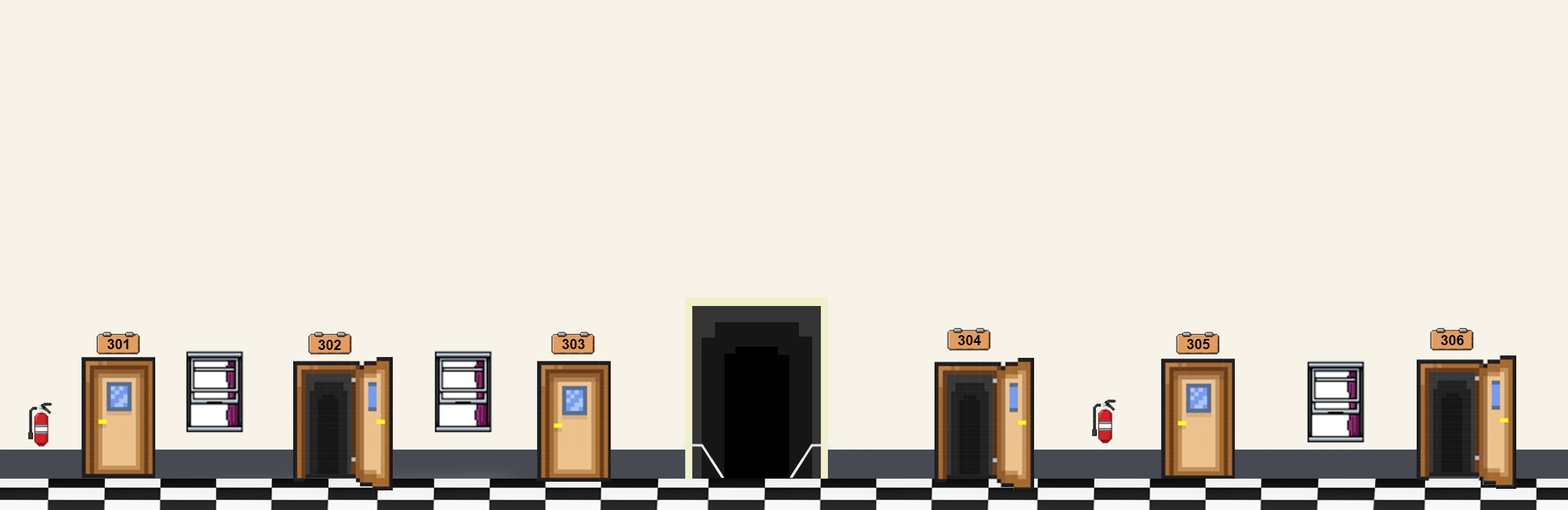
<style>
.page{position:relative;width:1568px;height:510px;background:#f8f3e8}
.page>*{position:absolute;margin:0}
.t1{font:14.1px "Arial-BoldMT";color:#000000}
</style>
<div class="page">
<p class="t1" style="left:107px;top:339px;width:22px;height:10px">301</p>
<p class="t1" style="left:318px;top:339px;width:23px;height:11px">302</p>
<p class="t1" style="left:562px;top:339px;width:23px;height:10px">303</p>
<p class="t1" style="left:958px;top:335px;width:24px;height:10px">304</p>
<p class="t1" style="left:1187px;top:339px;width:23px;height:10px">305</p>
<p class="t1" style="left:1441px;top:335px;width:23px;height:10px">306</p>
</div>
